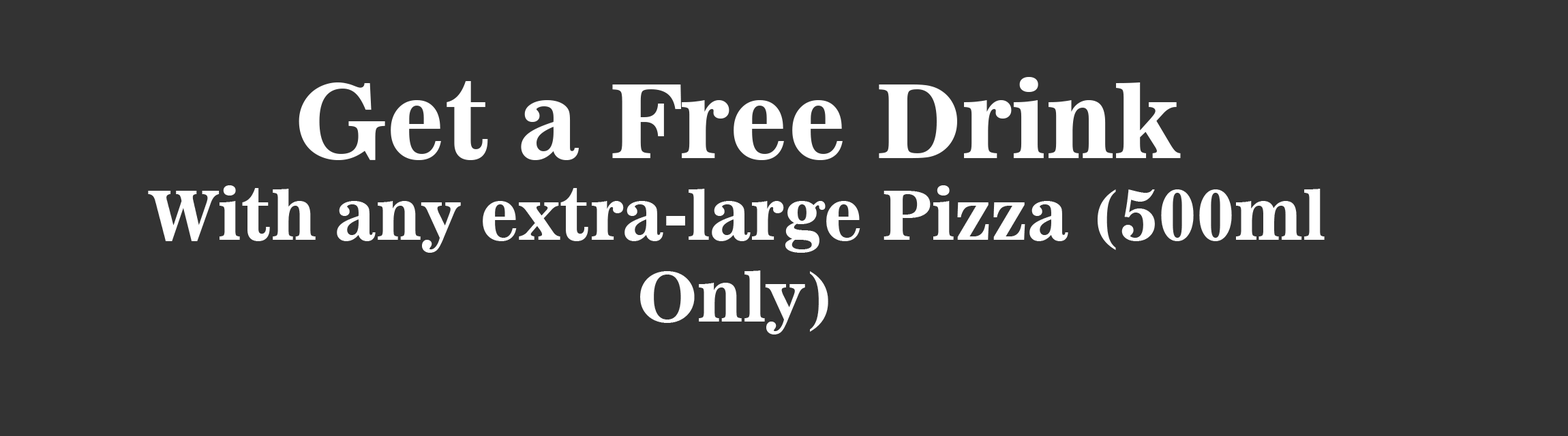
<style>
.page{position:relative;width:1568px;height:436px;background:#333333}
.page>*{position:absolute;margin:0}
.t1{font:68.2px "News701BT-BoldA";color:#ffffff}
.t2{font:102.3px "News701BT-BoldA";color:#ffffff}
</style>
<div class="page">
<p class="t1" style="left:148px;top:77px;width:1177px;height:258px;text-align:center"><span class="t2">Get a Free Drink<br></span>With any extra-large Pizza (500ml Only)</p>
</div>
